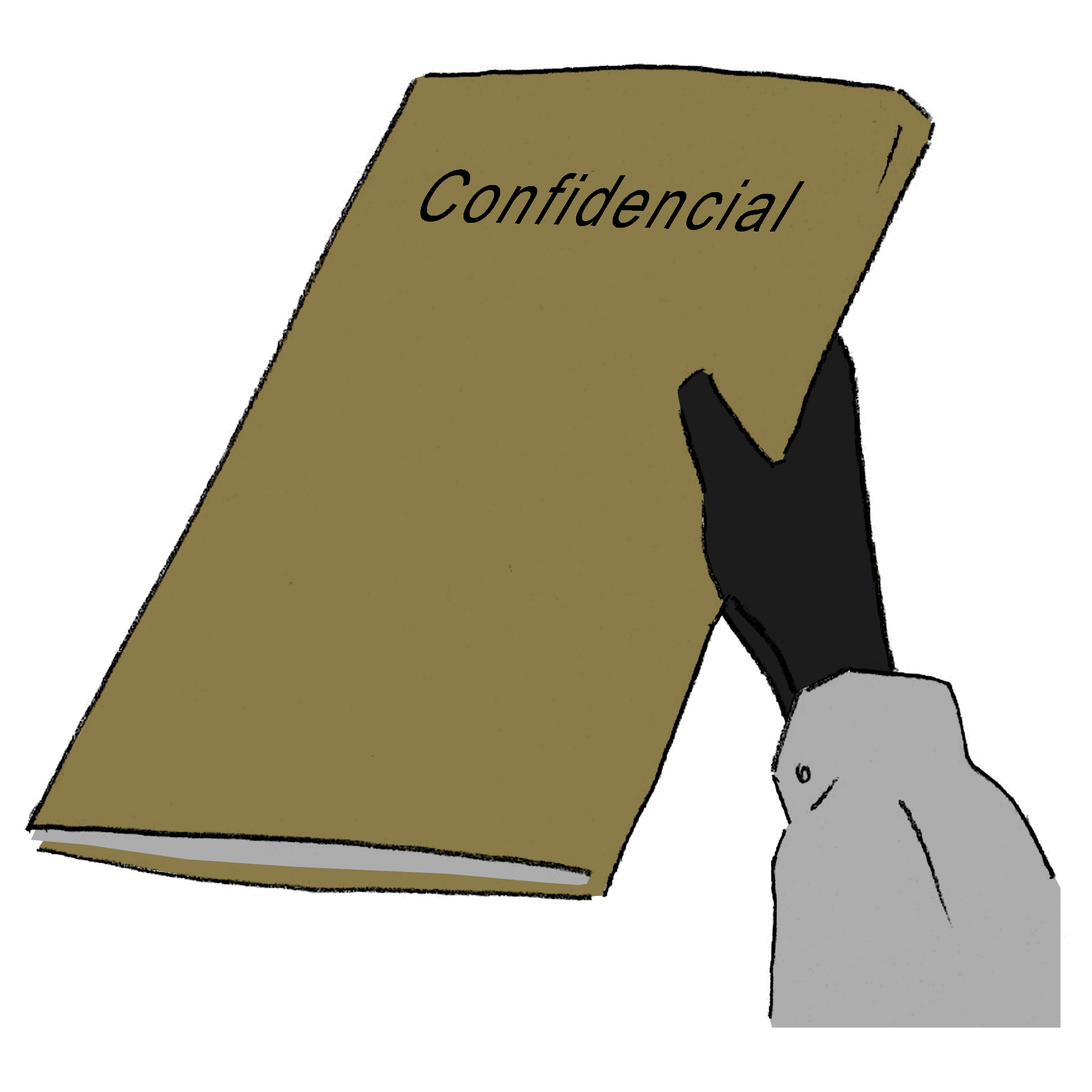
<style>
.page{position:relative;width:1092px;height:1092px;background:#ffffff}
.page>*{position:absolute;margin:0}
.t1{font:81.9px "ArialNarrow";letter-spacing:0.075em;color:#000000;scale:0.85 1}
</style>
<div class="page">
<p class="t1" style="left:420px;top:169px;width:384px;height:63px;rotate:2deg">Confidencial</p>
</div>
